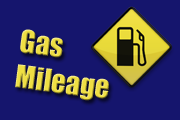
<style>
.page{position:relative;width:180px;height:120px;background:#15156d}
.page>*{position:absolute;margin:0}
.t1{font:29.1px "Impact";color:#efdf43}
</style>
<div class="page">
<p class="t1" style="left:15px;top:29px;width:94px;height:72px;rotate:7deg">Gas<br>Mileage</p>
</div>
